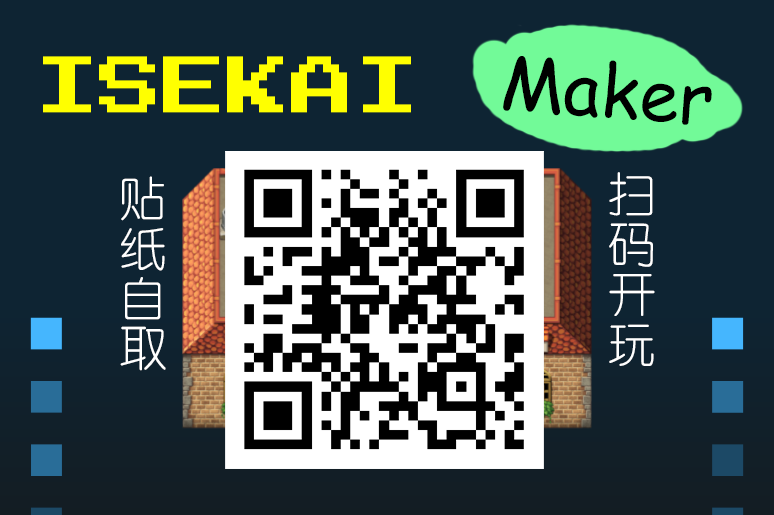
<style>
.page{position:relative;width:774px;height:515px;background:#0e2433}
.page>*{position:absolute;margin:0}
.t1{font:72.1px "ComicSansMS";color:#000000}
.t2{font:48px/50px "YouYuan";color:#ffffff}
</style>
<div class="page">
<p class="t1" style="left:503px;top:56px;width:209px;height:69px;rotate:4deg">Maker</p>
<p class="t2" style="left:609px;top:172px;width:46px;height:194px">扫<br>码<br>开<br>玩</p>
<p class="t2" style="left:120px;top:176px;width:46px;height:195px">贴<br>纸<br>自<br>取</p>
</div>
